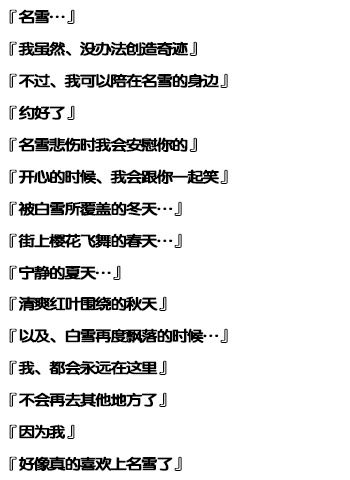
<style>
.page{position:relative;width:350px;height:480px;background:#ffffff}
.page>*{position:absolute;margin:0}
.t1{font:15px/32px "FZY4K--GBK1-0";letter-spacing:-0.13em;color:#000000;font-weight:bold;scale:1.14 1}
.t2{font:15px/30.7px "FZY4K--GBK1-0";letter-spacing:-0.13em;color:#000000;font-weight:bold;scale:1.14 1}
</style>
<div class="page">
<p class="t1" style="left:9px;top:9px;width:219px;height:462px">『名雪…』<br>『我虽然、没办法创造奇迹』<br>『不过、我可以陪在名雪的身边』<br>『约好了』<br>『名雪悲伤时我会安慰你的』<br>『开心的时候、我会跟你一起笑』<br>『被白雪所覆盖的冬天…』<br>『街上樱花飞舞的春天…』<br><span class="t2">『宁静的夏天…』<br></span>『清爽红叶围绕的秋天』<br>『以及、白雪再度飘落的时候…』<br>『我、都会永远在这里』<br>『不会再去其他地方了』<br>『因为我』<br>『好像真的喜欢上名雪了』</p>
</div>
